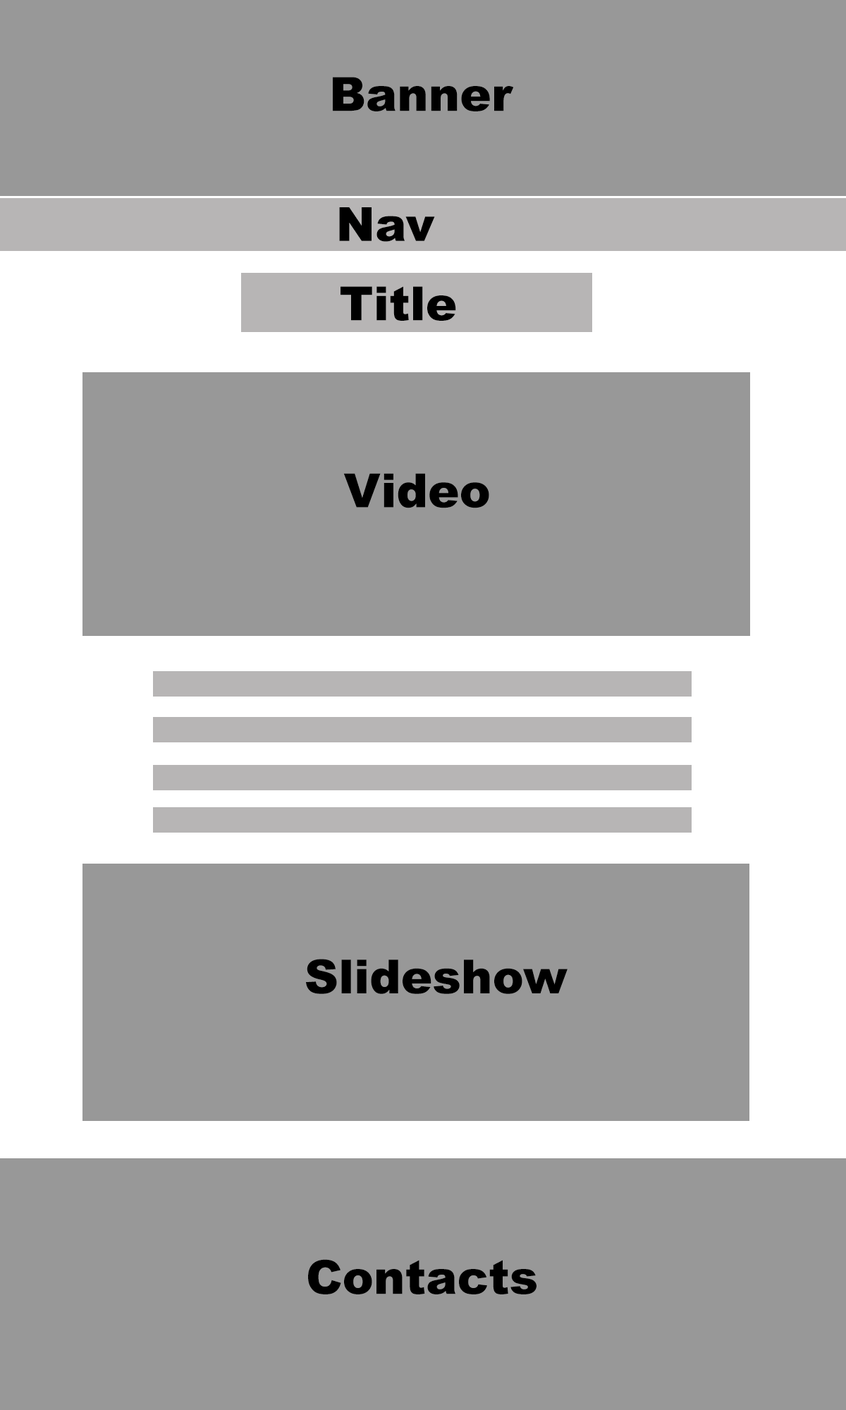
<style>
.page{position:relative;width:846px;height:1410px;background:#989898}
.page>*{position:absolute;margin:0}
.t1{font:47px "Arial-Black";color:#000000}
</style>
<div class="page">
<p class="t1" style="left:333px;top:77px;width:181px;height:34px">Banner</p>
<p class="t1" style="left:339px;top:207px;width:96px;height:35px">Nav</p>
<p class="t1" style="left:340px;top:286px;width:116px;height:35px">Title</p>
<p class="t1" style="left:343px;top:473px;width:146px;height:35px">Video</p>
<p class="t1" style="left:306px;top:959px;width:261px;height:35px">Slideshow</p>
<p class="t1" style="left:308px;top:1259px;width:228px;height:35px">Contacts</p>
</div>
